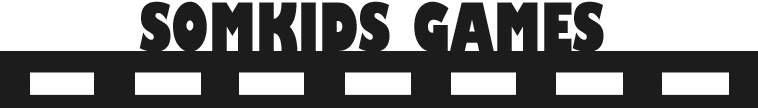
<style>
.page{position:relative;width:758px;height:108px;background:#1c1c1c}
.page>*{position:absolute;margin:0}
.t1{font:65px "GillSans-UltraBoldCondensed";color:#1c1c1c}
</style>
<div class="page">
<p class="t1" style="left:139px;top:1px;width:465px;height:51px">SOMKIDS GAMES</p>
</div>
